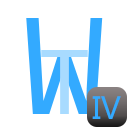
<style>
.page{position:relative;width:128px;height:128px;background:#ffffff}
.page>*{position:absolute;margin:0}
.t1{font:30px "MicrosoftYaHei";color:#33aaff}
</style>
<div class="page">
<p class="t1" style="left:92px;top:96px;width:29px;height:23px">IV</p>
</div>
